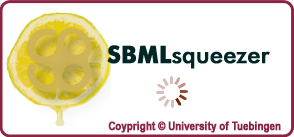
<style>
.page{position:relative;width:294px;height:137px;background:#ffffff}
.page>*{position:absolute;margin:0}
.t1{font:24px "FuturaBT-Medium";color:#002626;font-weight:bold;scale:0.95 1}
.t2{font:24px "FuturaBT-Bold";color:#002626;font-weight:bold;scale:0.95 1}
.t3{font:12px "ArialNarrow-Bold";color:#8b2440;font-weight:bold;scale:0.95 1}
</style>
<div class="page">
<p class="t1" style="left:107px;top:45px;width:163px;height:24px"><span class="t2">SBML</span>squeezer</p>
<p class="t3" style="left:108px;top:121px;width:173px;height:12px">Coypright © University of Tuebingen</p>
</div>
